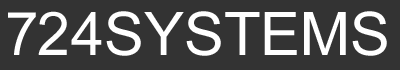
<style>
.page{position:relative;width:400px;height:70px;background:#333333}
.page>*{position:absolute;margin:0}
.t1{font:60px "ArialMT";color:#ffffff}
</style>
<div class="page">
<p class="t1" style="left:8px;top:11px;width:379px;height:45px">724SYSTEMS</p>
</div>
